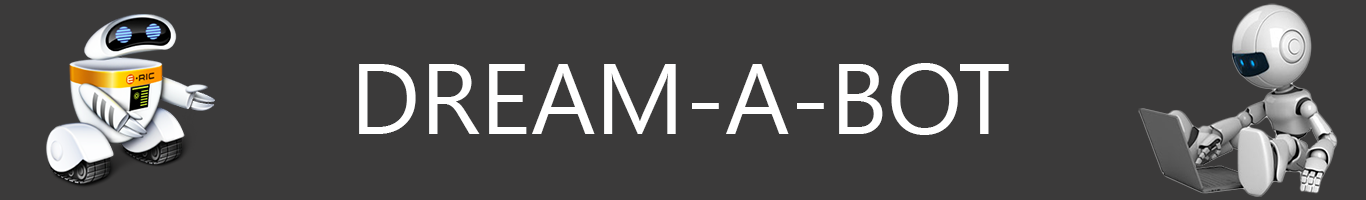
<style>
.page{position:relative;width:1366px;height:200px;background:#3b3a3a}
.page>*{position:absolute;margin:0}
.t1{font:100px "SegoeUI";color:#ffffff}
</style>
<div class="page">
<p class="t1" style="left:359px;top:63px;width:650px;height:72px">DREAM-A-BOT</p>
</div>
